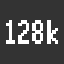
<style>
.page{position:relative;width:64px;height:64px;background:#333333}
.page>*{position:absolute;margin:0}
.t1{font:40.9px "Glasstown-NBP";letter-spacing:0.005em;color:#ffffff;font-weight:bold}
</style>
<div class="page">
<p class="t1" style="left:6px;top:20px;width:52px;height:24px">128k</p>
</div>
